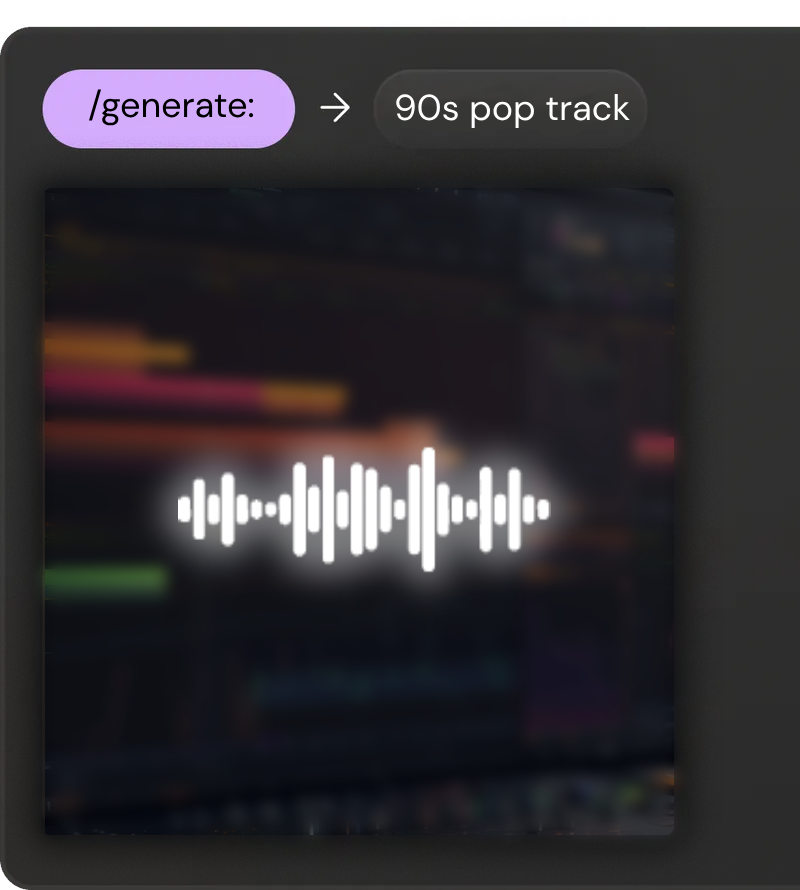
<style>
.page{position:relative;width:800px;height:890px}
.page>*{position:absolute;margin:0}
.t1{font:36px "DMSans-Regular";color:#000000}
.t2{font:36px "DMSans-Regular";color:#ffffff}
</style>
<div class="page">
<p class="t1" style="left:89px;top:89px;width:165px;height:37px">/generate:</p>
<p class="t2" style="left:396px;top:94px;width:234px;height:34px">90s pop track</p>
</div>
